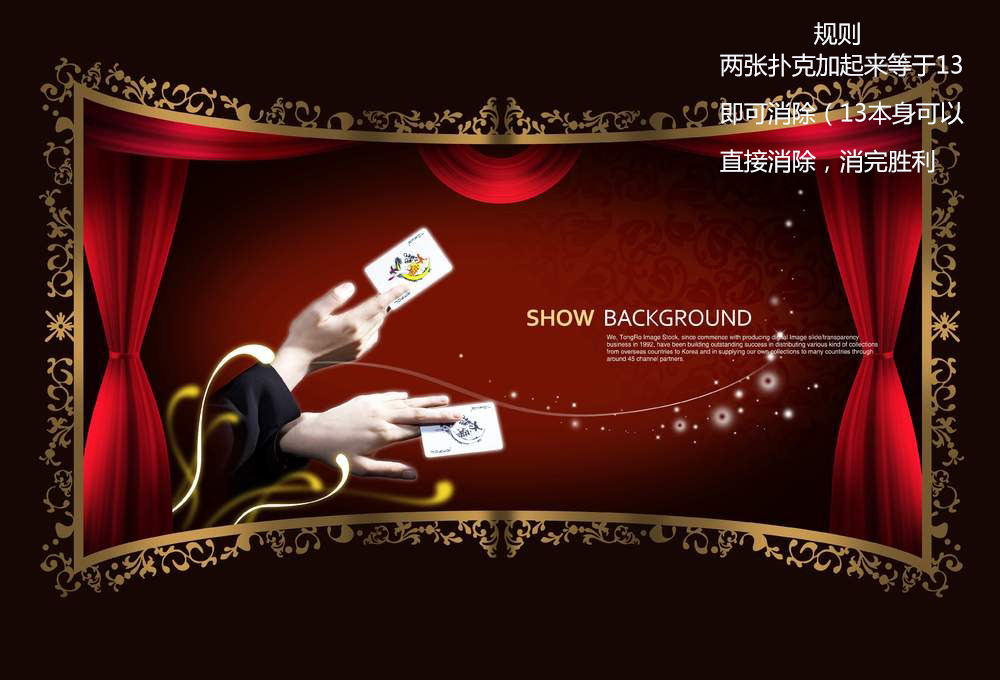
<style>
.page{position:relative;width:1000px;height:680px;background:#160704}
.page>*{position:absolute;margin:0}
.t1{font:24px "MicrosoftYaHei";color:#f7fbfd}
.t2{font:24px "MicrosoftYaHei";color:#160704}
.t3{font:24px/48px "MicrosoftYaHei";color:#f5fafd}
.t4{font:24px/48px "MicrosoftYaHei";color:#f8f7fd}
</style>
<div class="page">
<p class="t1" style="left:814px;top:22px;width:46px;height:24px"><span class="t2">   </span>规则</p>
<p class="t3" style="left:720px;top:53px;width:244px;height:120px"><span class="t4">两张扑克加起来等于13<br></span>即可消除（13本身可以<br>直接消除，消完胜利</p>
</div>
